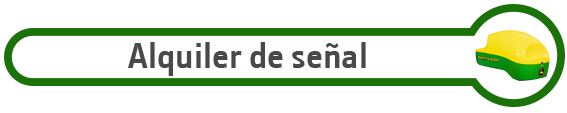
<style>
.page{position:relative;width:567px;height:113px;background:#ffffff}
.page>*{position:absolute;margin:0}
.t1{font:36px "JDSans-Bold";color:#484948}
</style>
<div class="page">
<p class="t1" style="left:128px;top:42px;width:238px;height:34px">Alquiler de señal</p>
</div>
